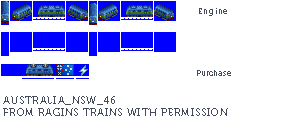
<style>
.page{position:relative;width:289px;height:124px;background:#ffffff}
.page>*{position:absolute;margin:0}
.t1{font:8px "Museo700-Regular";letter-spacing:0.075em;color:#444c5c}
.t2{font:8px "Museo700-Regular";color:#444c5c}
.t3{font:10px "Museo700-Regular";letter-spacing:0.075em;color:#444c5c;text-transform:uppercase}
</style>
<div class="page">
<p class="t1" style="left:199px;top:8px;width:28px;height:8px">Engine</p>
<p class="t2" style="left:197px;top:70px;width:34px;height:6px">Purchase</p>
<p class="t3" style="left:3px;top:96px;width:225px;height:20px">Australia_NSW_46<br>from ragins trains with permission</p>
</div>
